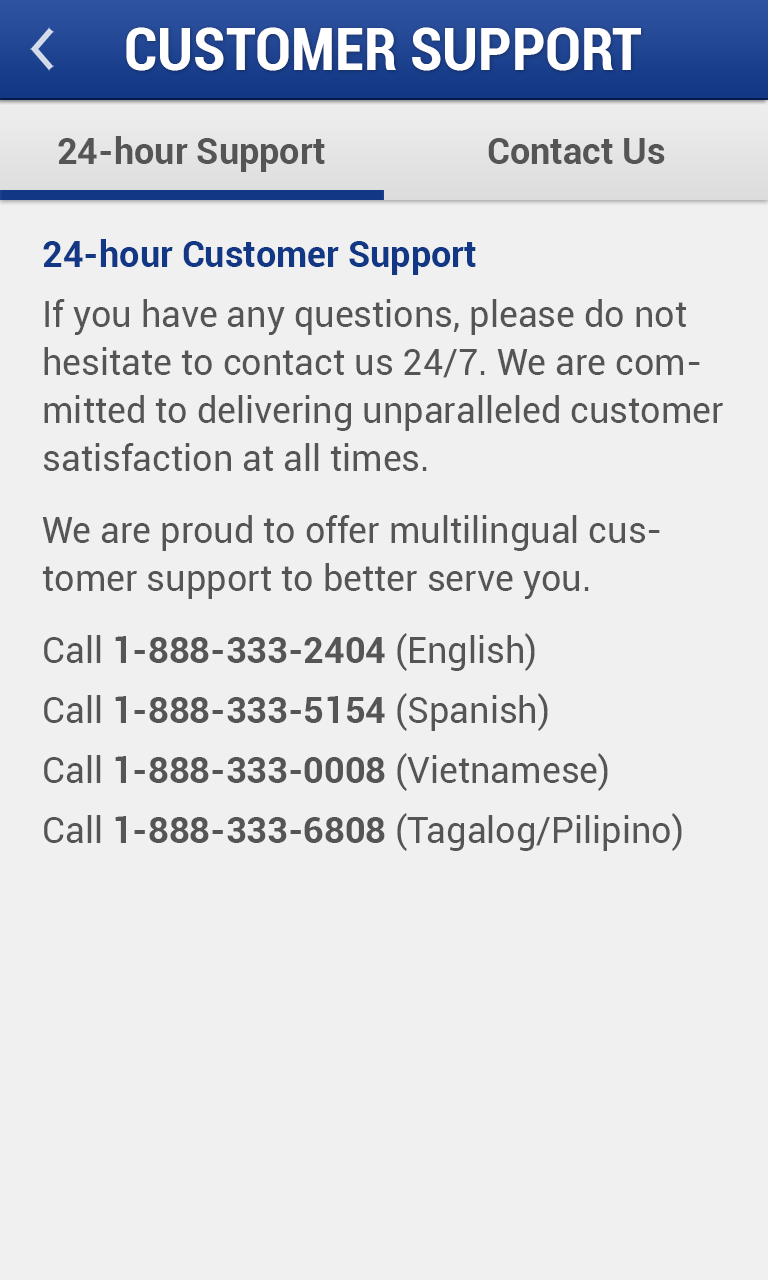
<style>
.page{position:relative;width:768px;height:1280px;background:#f0f0f0}
.page>*{position:absolute;margin:0}
.t1{font:60px "Roboto-BoldCondensed";color:#ffffff}
.t2{font:36px "Roboto-Bold";color:#555555}
.t3{font:36px/48px "Roboto-Regular";color:#555555}
.t4{font:36px/48px "Roboto-Bold";color:#123785}
.t5{font:36px/48px "Roboto-Bold";color:#555555}
</style>
<div class="page">
<p class="t1" style="left:126px;top:27px;width:515px;height:44px">CUSTOMER SUPPORT</p>
<p class="t2" style="left:58px;top:136px;width:267px;height:36px">24-hour Support</p>
<p class="t2" style="left:488px;top:138px;width:177px;height:26px">Contact Us</p>
<p class="t3" style="left:42px;top:239px;width:681px;height:612px"><span class="t4">24-hour Customer Support<br></span>If you have any questions, please do not hesitate to contact us 24/7. We are committed to delivering unparalleled customer satisfaction at all times.<br>We are proud to offer multilingual customer support to better serve you.<br>Call <span class="t5">1-888-333-2404</span> (English)<br>Call <span class="t5">1-888-333-5154</span> (Spanish)<br>Call <span class="t5">1-888-333-0008</span> (Vietnamese)<br>Call <span class="t5">1-888-333-6808</span> (Tagalog/Pilipino)</p>
</div>
